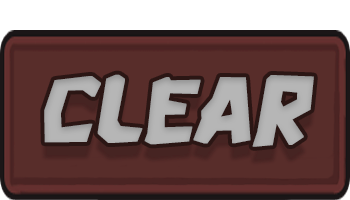
<style>
.page{position:relative;width:350px;height:200px;background:#582d2a}
.page>*{position:absolute;margin:0}
.t1{font:95.8px "Boulder";letter-spacing:-0.025em;color:#b6b6b6;font-weight:bold;font-style:italic}
</style>
<div class="page">
<p class="t1" style="left:44px;top:74px;width:270px;height:73px">clear</p>
</div>
